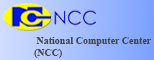
<style>
.page{position:relative;width:154px;height:60px}
.page>*{position:absolute;margin:0}
.t1{font:10px "TimesNewRomanPS-BoldMT";color:#454545}
</style>
<div class="page">
<p class="t1" style="left:34px;top:37px;width:118px;height:21px;text-align:right">National Computer Center <br>(NCC)</p>
</div>
